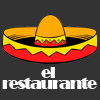
<style>
.page{position:relative;width:100px;height:100px;background:#333333}
.page>*{position:absolute;margin:0}
.t1{font:15.6px/10.9px "Broadway";letter-spacing:-0.1em;color:#ffffff;scale:1.12 1}
.t2{font:15.6px/10.9px "Broadway";letter-spacing:-0.1em;color:#000000;scale:1.12 1}
</style>
<div class="page">
<p class="t1" style="left:2px;top:67px;width:95px;height:22px"><span class="t2">               </span>el <br>restaurante</p>
</div>
